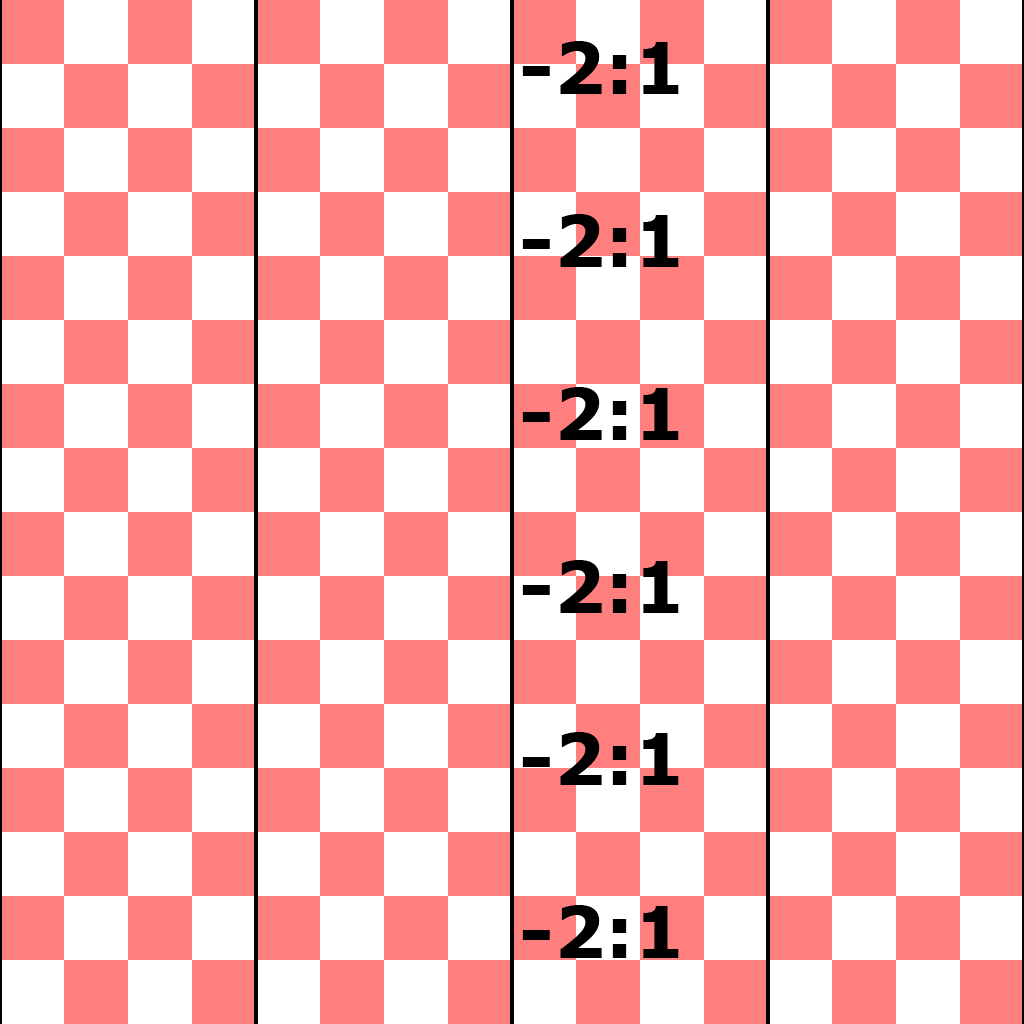
<style>
.page{position:relative;width:1024px;height:1024px;background:#ffffff}
.page>*{position:absolute;margin:0}
.t1{font:72px "Verdana-Bold";color:#000000}
</style>
<div class="page">
<p class="t1" style="left:522px;top:41px;width:157px;height:917px">-2:1<br><br>-2:1<br><br>-2:1<br><br>-2:1<br><br>-2:1<br><br>-2:1</p>
</div>
